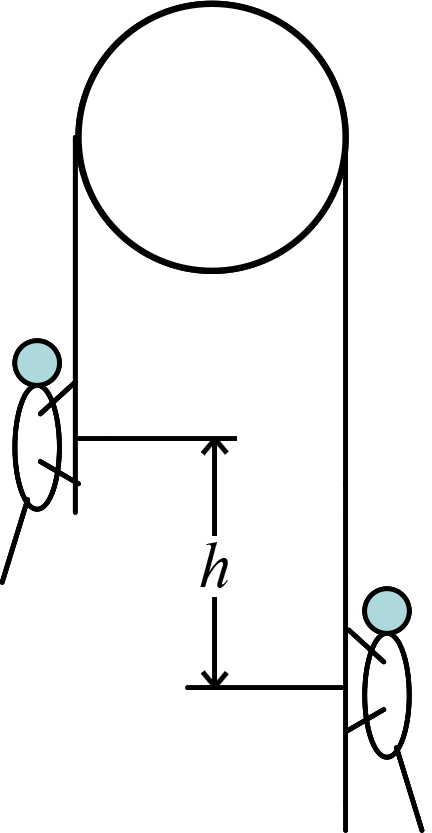
<style>
.page{position:relative;width:432px;height:833px;background:#ffffff}
.page>*{position:absolute;margin:0}
.t1{font:64px "TimesNewRomanPS-ItalicMT";color:#000000}
</style>
<div class="page">
<p class="t1" style="left:200px;top:542px;width:28px;height:46px">h</p>
</div>
